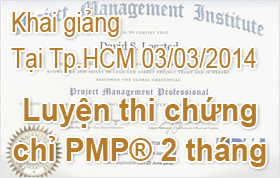
<style>
.page{position:relative;width:280px;height:178px}
.page>*{position:absolute;margin:0}
.t1{font:26.9px "ArialMT";color:#b87c28;scale:0.86 1}
.t2{font:32.1px "Arial-BoldMT";color:#b87c28;scale:0.94 1}
</style>
<div class="page">
<p class="t1" style="left:11px;top:10px;width:245px;height:63px">Khai giảng<br>Tại Tp.HCM 03/03/2014</p>
<p class="t2" style="left:13px;top:97px;width:253px;height:70px;text-align:center">Luyện thi chứng<br>chỉ PMP® 2 tháng</p>
</div>
